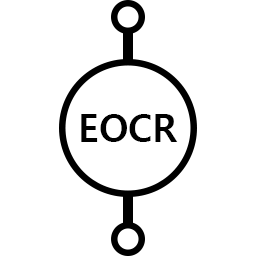
<style>
.page{position:relative;width:256px;height:256px;background:#ffffff}
.page>*{position:absolute;margin:0}
.t1{font:37.5px "MalgunGothicBold";color:#000000}
</style>
<div class="page">
<p class="t1" style="left:81px;top:114px;width:97px;height:28px">EOCR</p>
</div>
